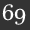
<style>
.page{position:relative;width:30px;height:30px;background:#333333}
.page>*{position:absolute;margin:0}
.t1{font:24px "PlantagenetCherokee";color:#ffffff}
</style>
<div class="page">
<p class="t1" style="left:2px;top:4px;width:24px;height:21px">69</p>
</div>
